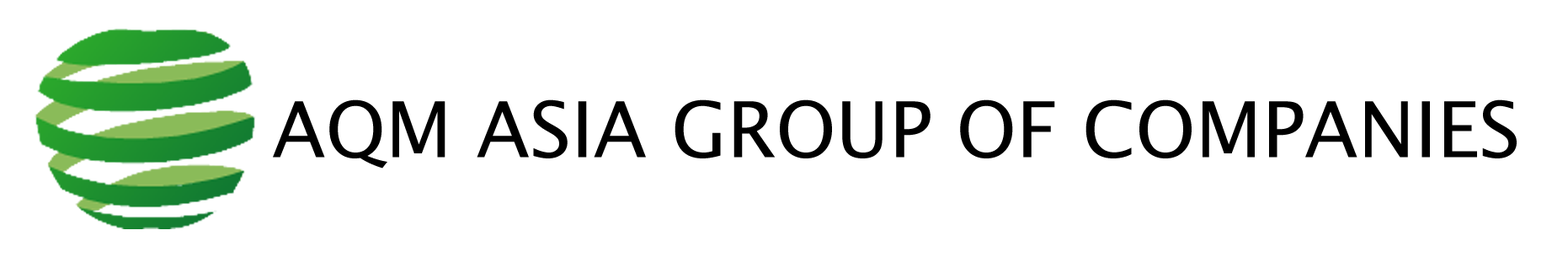
<style>
.page{position:relative;width:1568px;height:257px;background:#ffffff}
.page>*{position:absolute;margin:0}
.t1{font:77.2px "LucidaSansUnicode";color:#000000}
</style>
<div class="page">
<p class="t1" style="left:273px;top:99px;width:1244px;height:69px">AQM ASIA GROUP OF COMPANIES</p>
</div>
